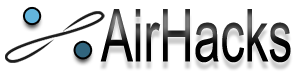
<style>
.page{position:relative;width:295px;height:78px;background:#ffffff}
.page>*{position:absolute;margin:0}
.t1{font:125px "ArialNarrow";scale:0.8 1}
</style>
<div class="page">
<p class="t1" style="left:100px;top:9px;width:191px;height:54px">AirHacks</p>
</div>
